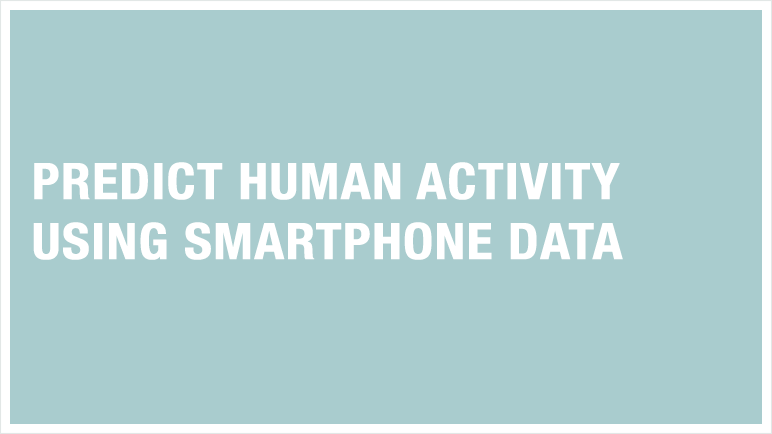
<style>
.page{position:relative;width:772px;height:434px;background:#a9ccce}
.page>*{position:absolute;margin:0}
.t1{font:50px "HelveticaNeue-CondensedBold";color:#ffffff;font-weight:bold;scale:1.07 1}
</style>
<div class="page">
<p class="t1" style="left:33px;top:162px;width:590px;height:98px">PREDICT HUMAN ACTIVITY <br>USING SMARTPHONE DATA</p>
</div>
